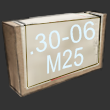
<style>
.page{position:relative;width:110px;height:110px;background:#333333}
.page>*{position:absolute;margin:0}
.t1{font:24.7px "Arial";letter-spacing:0.025em;color:#e1f5fe;scale:0.96 1}
.t2{font:12px "Arial";letter-spacing:0.025em;color:#e1f5fe;scale:0.79 1}
</style>
<div class="page">
<p class="t1" style="left:30px;top:21px;width:66px;height:34px;rotate:-14deg">.30-06</p>
<p class="t2" style="left:47px;top:47px;width:37px;height:27px;rotate:-15deg">M25</p>
</div>
